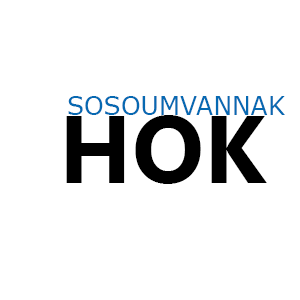
<style>
.page{position:relative;width:300px;height:300px;background:#ffffff}
.page>*{position:absolute;margin:0}
.t1{font:25px "Verdana";color:#0669b2}
.t2{font:95px "NirmalaUI-Bold";color:#000000}
</style>
<div class="page">
<p class="t1" style="left:68px;top:96px;width:217px;height:19px">SOSOUMVANNAK</p>
<p class="t2" style="left:66px;top:115px;width:201px;height:69px">HOK</p>
</div>
